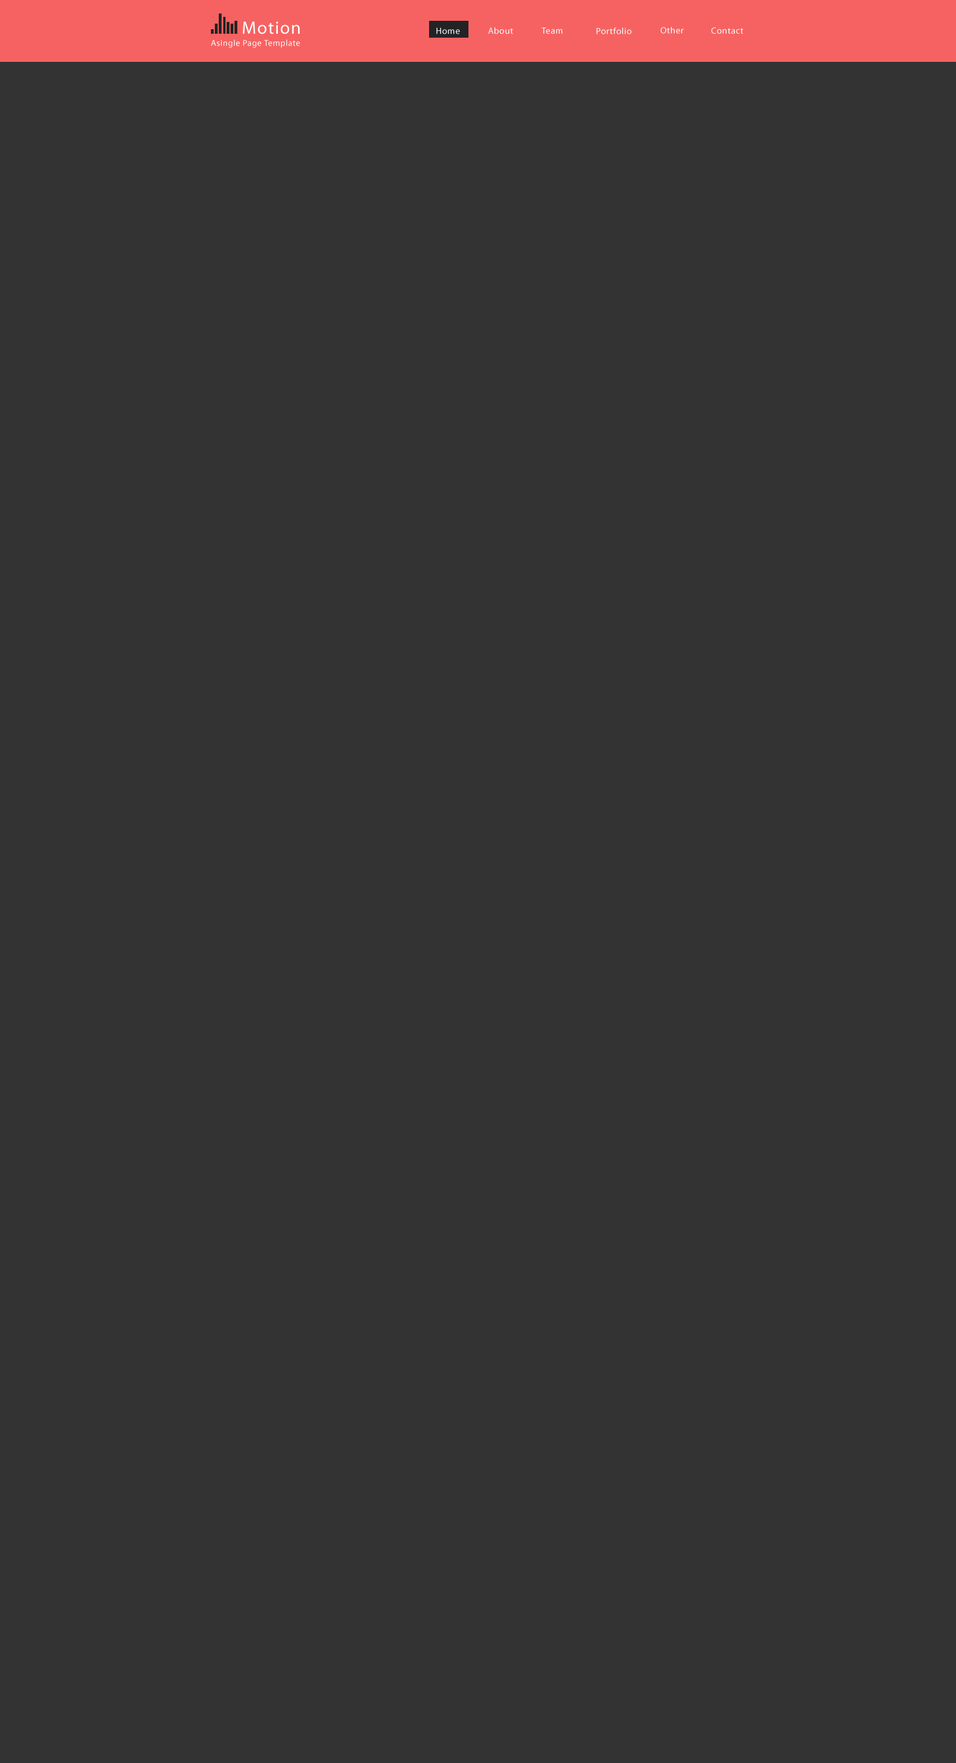
<style>
.page{position:relative;width:956px;height:1763px;background:#333333}
.page>*{position:absolute;margin:0}
.t1{font:18px "MyriadPro-Regular";letter-spacing:0.05em;color:#feffff}
.t2{font:9px "MyriadPro-Regular";letter-spacing:0.05em;color:#fafafc}
.t3{font:8.6px "MyriadPro-Regular";letter-spacing:0.05em;color:#feffff}
</style>
<div class="page">
<p class="t1" style="left:242px;top:21px;width:58px;height:13px">Motion</p>
<p class="t2" style="left:436px;top:28px;width:24px;height:6px">Home</p>
<p class="t2" style="left:488px;top:27px;width:25px;height:7px">About</p>
<p class="t2" style="left:542px;top:28px;width:20px;height:6px">Team</p>
<p class="t2" style="left:596px;top:28px;width:36px;height:6px">Portfolio</p>
<p class="t2" style="left:660px;top:27px;width:24px;height:7px">Other</p>
<p class="t2" style="left:711px;top:27px;width:33px;height:7px">Contact</p>
<p class="t3" style="left:211px;top:39px;width:89px;height:9px">Asingle Page Template</p>
</div>
